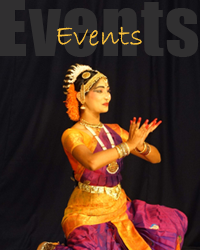
<style>
.page{position:relative;width:200px;height:250px}
.page>*{position:absolute;margin:0}
.t1{font:73.4px "Impact";letter-spacing:0.02em;color:#302f30}
.t2{font:30px "BradleyHandITC";letter-spacing:0.02em;color:#fec53c}
</style>
<div class="page">
<p class="t1" style="left:0px;top:0px;width:199px;height:57px">Events</p>
<p class="t2" style="left:57px;top:26px;width:85px;height:20px">Events</p>
</div>
